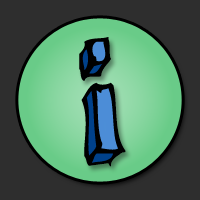
<style>
.page{position:relative;width:200px;height:200px;background:#2e2e2e}
.page>*{position:absolute;margin:0}
.t1{font:150.8px "3dumb";color:#000000}
</style>
<div class="page">
<p class="t1" style="left:79px;top:37px;width:47px;height:130px">i</p>
</div>
